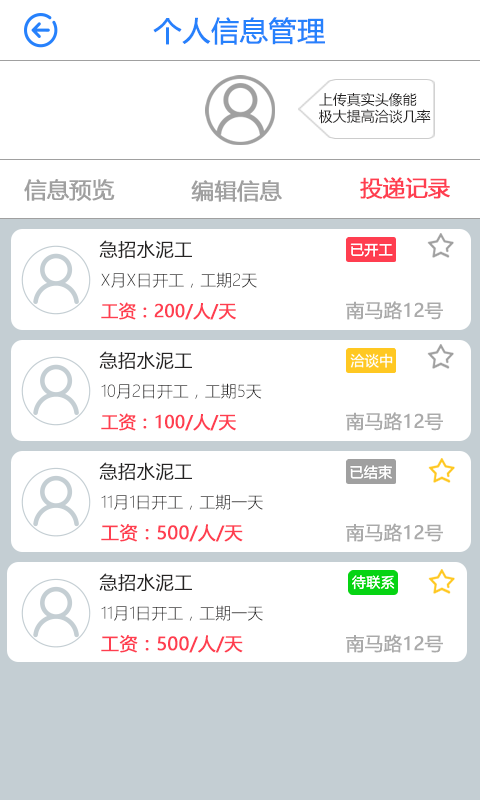
<style>
.page{position:relative;width:480px;height:800px;background:#ffffff}
.page>*{position:absolute;margin:0}
.t1{font:28px "MicrosoftYaHei";color:#2681fc;font-weight:bold}
.t2{font:14px "MicrosoftYaHei";color:#252323}
.t3{font:22px "MicrosoftYaHei";color:#a0a0a0;font-weight:bold}
.t4{font:22px "MicrosoftYaHei";color:#ff3e50;font-weight:bold}
.t5{font:18.3px "MicrosoftYaHeiLight";color:#252323;font-weight:bold}
.t6{font:16px "MicrosoftYaHeiLight";color:#252323}
.t7{font:17.1px "MicrosoftYaHei";color:#ff3e50;font-weight:bold}
.t8{font:18.3px "MicrosoftYaHei";color:#aaaaaa;font-weight:bold}
.t9{font:18px "MicrosoftYaHei";color:#ff3e50;font-weight:bold}
</style>
<div class="page">
<p class="t1" style="left:153px;top:17px;width:172px;height:28px">个人信息管理</p>
<p class="t2" style="left:319px;top:92px;width:112px;height:32px">上传真实头像能<br>极大提高洽谈几率</p>
<p class="t3" style="left:24px;top:179px;width:91px;height:22px">信息预览</p>
<p class="t3" style="left:191px;top:180px;width:91px;height:22px">编辑信息</p>
<p class="t4" style="left:360px;top:177px;width:90px;height:22px">投递记录</p>
<p class="t5" style="left:99px;top:240px;width:93px;height:19px">急招水泥工</p>
<p class="t6" style="left:101px;top:272px;width:156px;height:16px">X月X日开工，工期2天</p>
<p class="t7" style="left:101px;top:302px;width:135px;height:18px">工资：200/人/天</p>
<p class="t8" style="left:346px;top:301px;width:97px;height:19px">南马路12号</p>
<p class="t5" style="left:99px;top:351px;width:93px;height:19px">急招水泥工</p>
<p class="t6" style="left:101px;top:383px;width:161px;height:16px">10月2日开工，工期5天</p>
<p class="t7" style="left:101px;top:413px;width:135px;height:18px">工资：100/人/天</p>
<p class="t8" style="left:346px;top:412px;width:97px;height:19px">南马路12号</p>
<p class="t5" style="left:99px;top:462px;width:93px;height:19px">急招水泥工</p>
<p class="t6" style="left:101px;top:494px;width:162px;height:16px">11月1日开工，工期一天</p>
<p class="t9" style="left:101px;top:524px;width:142px;height:18px">工资：500/人/天</p>
<p class="t8" style="left:346px;top:523px;width:97px;height:19px">南马路12号</p>
<p class="t5" style="left:99px;top:573px;width:93px;height:19px">急招水泥工</p>
<p class="t6" style="left:101px;top:605px;width:162px;height:16px">11月1日开工，工期一天</p>
<p class="t9" style="left:101px;top:635px;width:142px;height:18px">工资：500/人/天</p>
<p class="t8" style="left:346px;top:634px;width:97px;height:19px">南马路12号</p>
</div>
